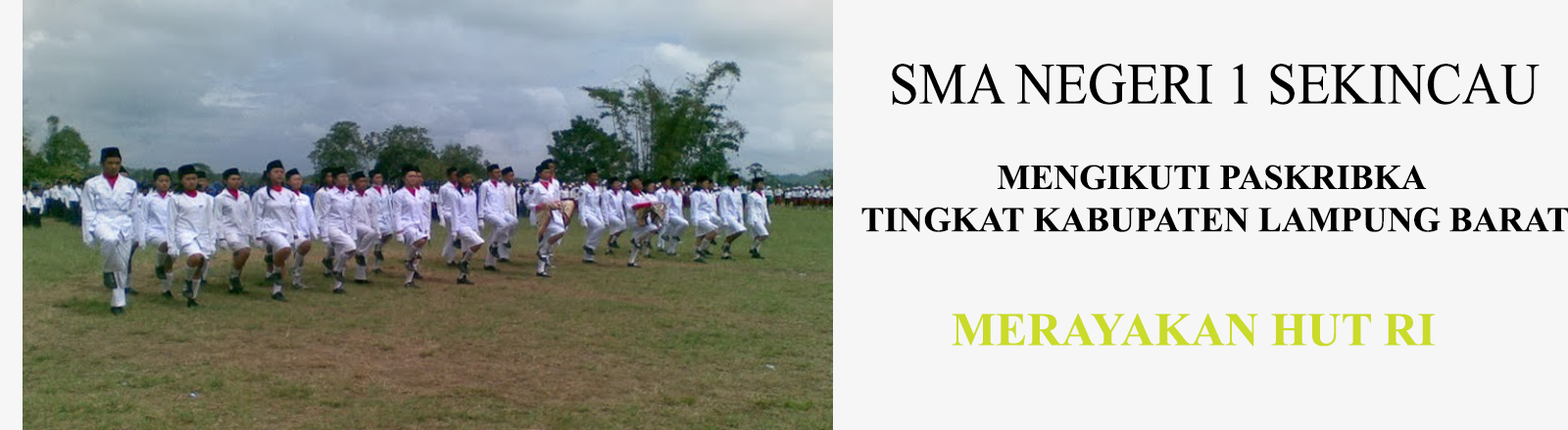
<style>
.page{position:relative;width:1568px;height:430px;background:#f6f6f6}
.page>*{position:absolute;margin:0}
.t1{font:58.6px "TimesNewRomanPSMT";color:#000000;scale:0.92 1}
.t2{font:35.3px "TimesNewRomanPS-BoldMT";color:#000000}
.t3{font:47px "TimesNewRomanPS-BoldMT";color:#cadb2a}
</style>
<div class="page">
<p class="t1" style="left:892px;top:64px;width:648px;height:41px">SMA NEGERI 1 SEKINCAU</p>
<p class="t2" style="left:861px;top:165px;width:708px;height:67px;text-align:center">MENGIKUTI PASKRIBKA <br>TINGKAT KABUPATEN LAMPUNG BARAT</p>
<p class="t3" style="left:952px;top:314px;width:483px;height:33px">MERAYAKAN HUT RI</p>
</div>
